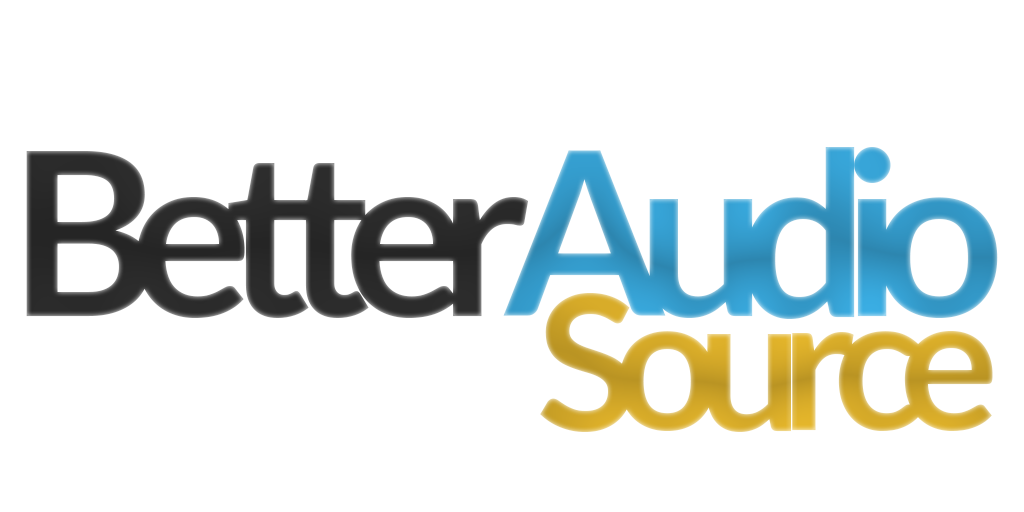
<style>
.page{position:relative;width:1024px;height:512px;background:#ffffff}
.page>*{position:absolute;margin:0}
.t1{font:229.2px "Lato-Bold";letter-spacing:-0.125em}
.t2{font:187.5px "Lato-Bold";letter-spacing:-0.125em}
</style>
<div class="page">
<p class="t1" style="left:26px;top:147px;width:972px;height:172px">BetterAudio</p>
<p class="t2" style="left:540px;top:293px;width:453px;height:139px">Source</p>
</div>
